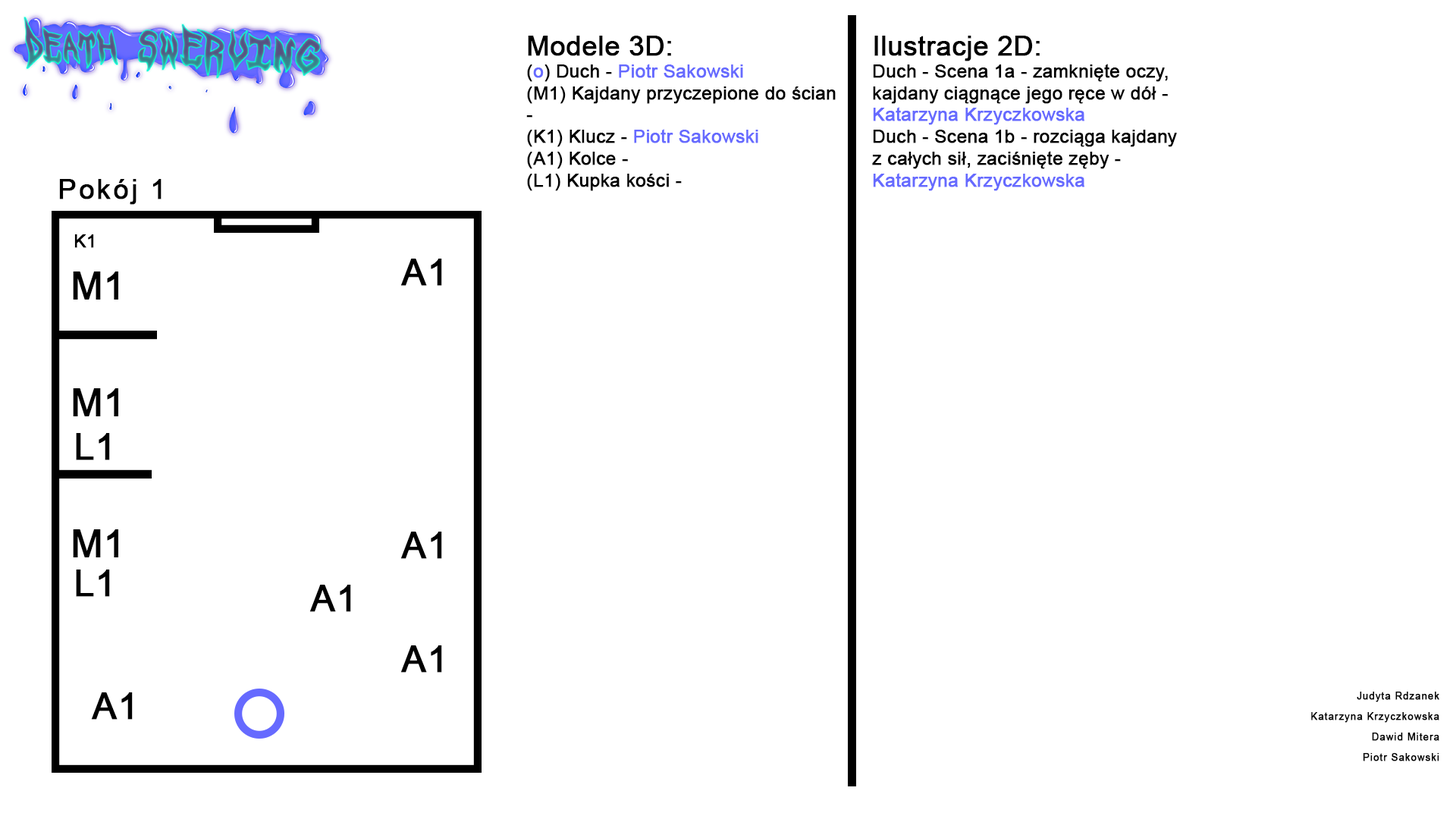
<style>
.page{position:relative;width:1456px;height:819px;background:#ffffff}
.page>*{position:absolute;margin:0}
.t1{font:18.2px "ArialMT";color:#000000;font-weight:bold}
.t2{font:27.3px "ArialMT";color:#000000;font-weight:bold}
.t3{font:18.2px "ArialMT";color:#666aff;font-weight:bold}
.t4{font:27.3px "ArialMT";letter-spacing:0.075em;color:#000000;font-weight:bold}
.t5{font:36.4px "ArialMT";color:#000000;font-weight:bold}
.t6{font:37.6px "ArialMT";color:#000000;font-weight:bold}
.t7{font:9.7px/20.5px "ArialMT";letter-spacing:0.075em;color:#000000;font-weight:bold}
</style>
<div class="page">
<p class="t1" style="left:526px;top:36px;width:310px;height:155px"><span class="t2">Modele 3D:<br></span>(<span class="t3">o</span>) Duch - <span class="t3">Piotr Sakowski<br></span>(M1) Kajdany przyczepione do ścian -<br>(K1) Klucz - <span class="t3">Piotr Sakowski<br></span>(A1) Kolce -<br>(L1) Kupka kości -</p>
<p class="t1" style="left:872px;top:36px;width:305px;height:155px"><span class="t2">Ilustracje 2D:<br></span>Duch - Scena 1a - zamknięte oczy, kajdany ciągnące jego ręce w dół - <span class="t3">Katarzyna Krzyczkowska<br></span>Duch - Scena 1b - rozciąga kajdany z całych sił, zaciśnięte zęby - <span class="t3">Katarzyna Krzyczkowska</span></p>
<p class="t4" style="left:59px;top:179px;width:103px;height:26px">Pokój 1</p>
<p class="t1" style="left:74px;top:234px;width:20px;height:14px">K1</p>
<p class="t5" style="left:400px;top:259px;width:42px;height:27px">A1</p>
<p class="t6" style="left:73px;top:271px;width:45px;height:29px">M1</p>
<p class="t6" style="left:73px;top:388px;width:45px;height:28px">M1</p>
<p class="t5" style="left:76px;top:433px;width:34px;height:27px">L1</p>
<p class="t6" style="left:73px;top:529px;width:45px;height:28px">M1</p>
<p class="t5" style="left:400px;top:532px;width:42px;height:27px">A1</p>
<p class="t5" style="left:76px;top:570px;width:34px;height:27px">L1</p>
<p class="t5" style="left:309px;top:585px;width:42px;height:27px">A1</p>
<p class="t5" style="left:400px;top:645px;width:42px;height:28px">A1</p>
<p class="t5" style="left:91px;top:692px;width:42px;height:28px">A1</p>
<p class="t7" style="left:1311px;top:692px;width:128px;height:69px;text-align:right">Judyta Rdzanek<br>Katarzyna Krzyczkowska<br>Dawid Mitera<br>Piotr Sakowski</p>
</div>
